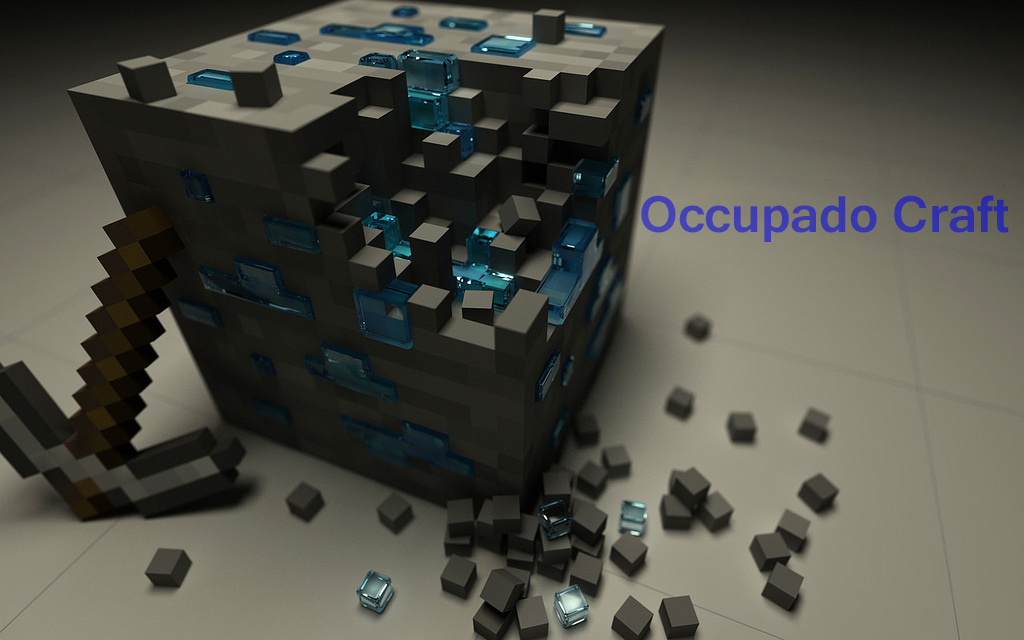
<style>
.page{position:relative;width:1024px;height:640px}
.page>*{position:absolute;margin:0}
.t1{font:54px "Gautami-Bold";color:#3c3baf}
</style>
<div class="page">
<p class="t1" style="left:641px;top:195px;width:368px;height:47px">Occupado Craft</p>
</div>
